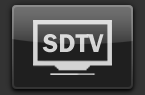
<style>
.page{position:relative;width:145px;height:95px;background:#1f1f1f}
.page>*{position:absolute;margin:0}
.t1{font:26.7px "FranklinGothic-Demi";color:#d8d8d8}
</style>
<div class="page">
<p class="t1" style="left:42px;top:34px;width:62px;height:19px">SDTV</p>
</div>
